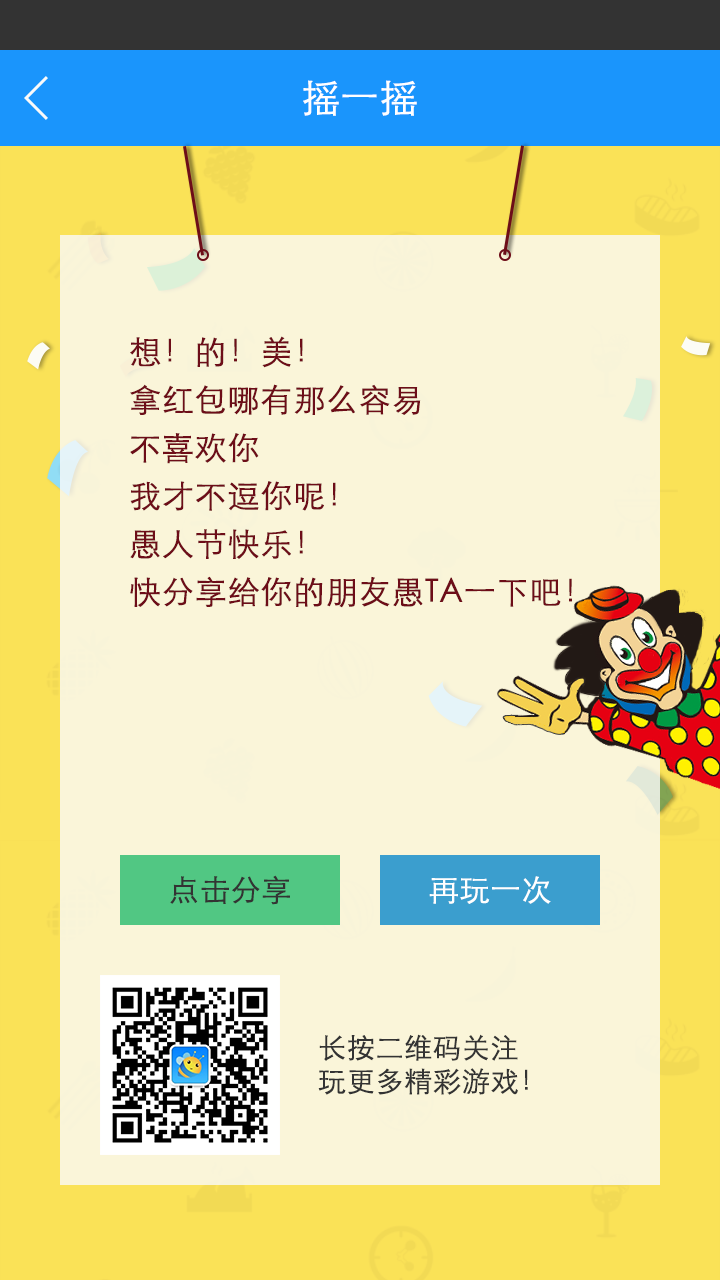
<style>
.page{position:relative;width:720px;height:1280px;background:#faf5d9}
.page>*{position:absolute;margin:0}
.t1{font:38px "STXihei";color:#ffffff;font-weight:bold}
.t2{font:32px/48px "STXihei";color:#6d0d18;font-weight:bold}
.t3{font:30px "STXihei";color:#333333;font-weight:bold}
.t4{font:30px "STXihei";color:#ffffff;font-weight:bold}
.t5{font:28px "STXihei";color:#333333;font-weight:bold}
</style>
<div class="page">
<p class="t1" style="left:303px;top:80px;width:114px;height:36px">摇一摇</p>
<p class="t2" style="left:130px;top:336px;width:442px;height:272px">想！的！美！<br>拿红包哪有那么容易<br>不喜欢你<br>我才不逗你呢！<br>愚人节快乐！<br>快分享给你的朋友愚TA一下吧！</p>
<p class="t3" style="left:170px;top:875px;width:120px;height:30px">点击分享</p>
<p class="t4" style="left:429px;top:876px;width:122px;height:28px">再玩一次</p>
<p class="t5" style="left:318px;top:1034px;width:210px;height:61px">长按二维码关注<br>玩更多精彩游戏！</p>
</div>
